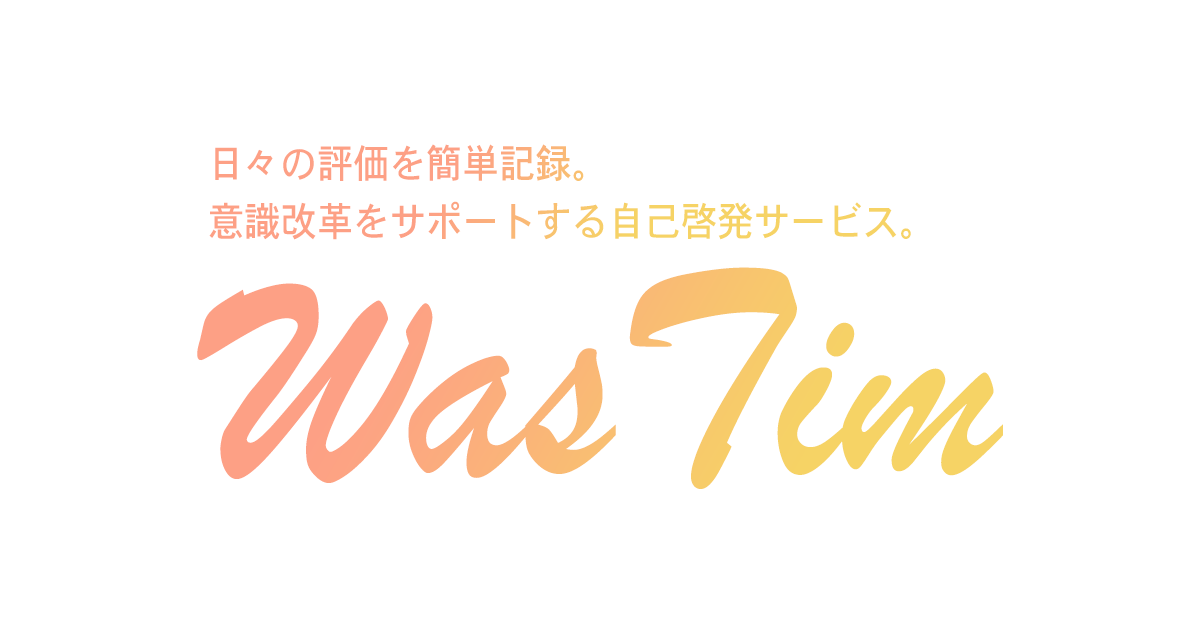
<style>
.page{position:relative;width:1200px;height:630px;background:#ffffff}
.page>*{position:absolute;margin:0}
.t1{font:40px/58px "Osaka";scale:0.91 1}
.t2{font:314px "BrushScriptMT";scale:0.91 1}
</style>
<div class="page">
<p class="t1" style="left:209px;top:144px;width:702px;height:96px">日々の評価を簡単記録。<br>意識改革をサポートする自己啓発サービス。</p>
<p class="t2" style="left:197px;top:267px;width:806px;height:222px">WasTim</p>
</div>
